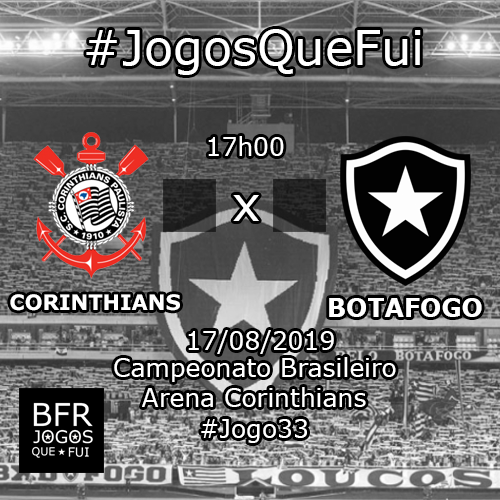
<style>
.page{position:relative;width:500px;height:500px}
.page>*{position:absolute;margin:0}
.t1{font:48px "Verdana";color:#ffffff}
.t2{font:25px "Verdana";color:#ffffff}
.t3{font:21.2px "Verdana-Bold";color:#ffffff}
.t4{font:25px "Verdana-Bold";color:#ffffff}
</style>
<div class="page">
<p class="t1" style="left:86px;top:29px;width:335px;height:46px">#JogosQueFui</p>
<p class="t2" style="left:208px;top:136px;width:76px;height:20px">17h00</p>
<p class="t1" style="left:233px;top:195px;width:26px;height:26px">x</p>
<p class="t3" style="left:10px;top:294px;width:170px;height:17px">CORINTHIANS</p>
<p class="t4" style="left:329px;top:298px;width:153px;height:19px">BOTAFOGO</p>
<p class="t2" style="left:188px;top:330px;width:146px;height:24px">17/08/2019</p>
<p class="t2" style="left:114px;top:357px;width:282px;height:25px">Campeonato Brasileiro</p>
<p class="t2" style="left:142px;top:387px;width:224px;height:20px">Arena Corinthians</p>
<p class="t2" style="left:201px;top:419px;width:106px;height:24px">#Jogo33</p>
</div>
